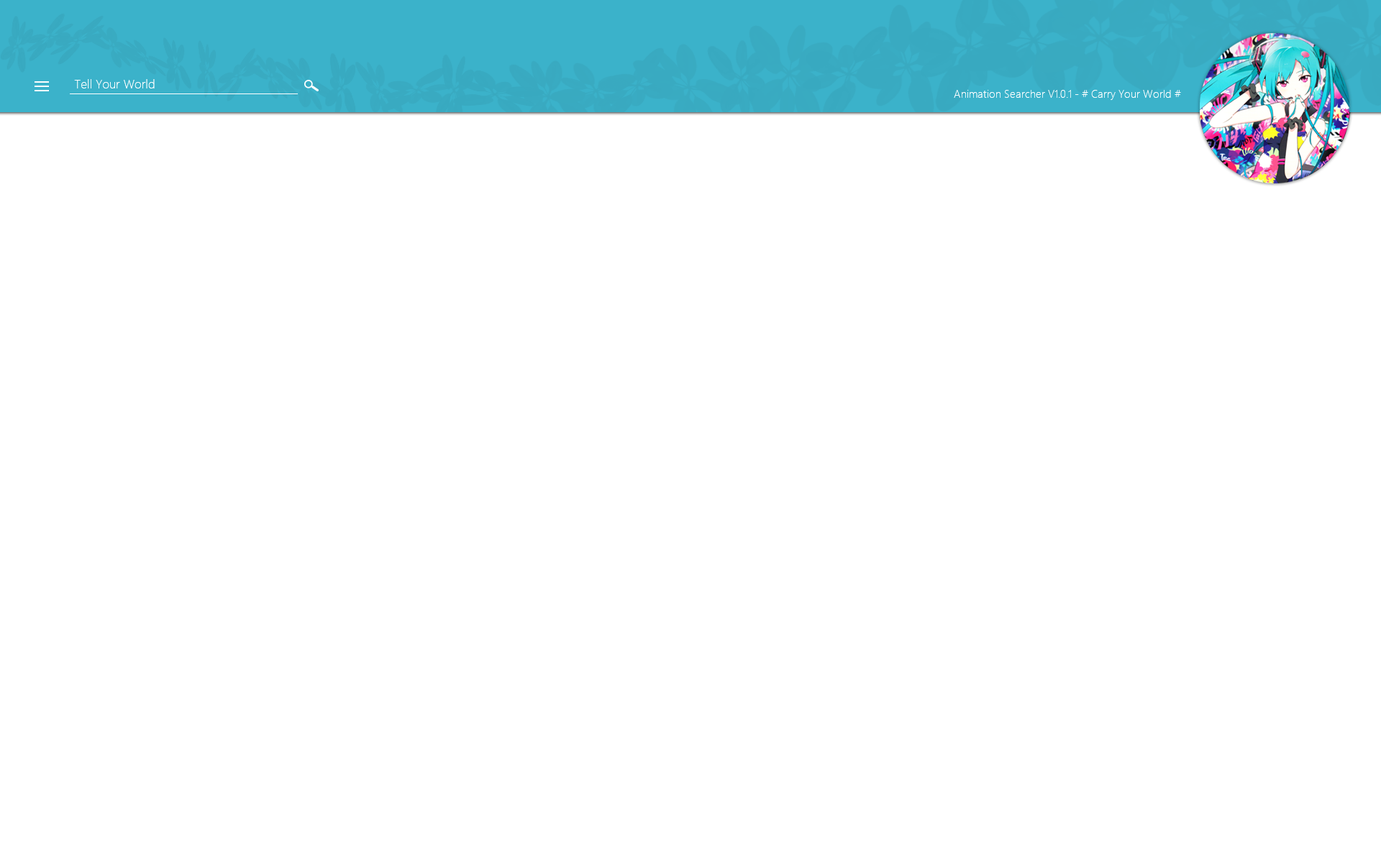
<style>
.page{position:relative;width:1381px;height:863px;background:#ffffff}
.page>*{position:absolute;margin:0}
.t1{font:11.5px "MicrosoftYaHeiLight";color:#ffffff}
.t2{font:10.1px "MicrosoftYaHeiLight";color:#ffffff}
</style>
<div class="page">
<p class="t1" style="left:74px;top:79px;width:81px;height:9px">Tell Your World</p>
<p class="t2" style="left:954px;top:90px;width:227px;height:10px">Animation Searcher V1.0.1 - # Carry Your World #</p>
</div>
